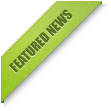
<style>
.page{position:relative;width:111px;height:111px;background:#ffffff}
.page>*{position:absolute;margin:0}
.t1{font:13px "Impact";color:#5b7020;text-transform:uppercase}
</style>
<div class="page">
<p class="t1" style="left:9px;top:9px;width:64px;height:64px;rotate:-45deg">featured news</p>
</div>
